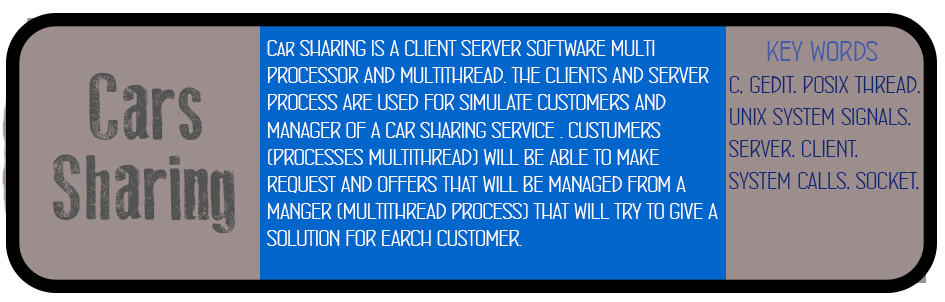
<style>
.page{position:relative;width:945px;height:302px;background:#9d8e8e}
.page>*{position:absolute;margin:0}
.t1{font:22.7px "ConcursoItalianBTNWide";color:#ffffff}
.t2{font:26.7px "ConcursoItalianBTNWide";color:#112672}
.t3{font:32px "ConcursoItalianBTNWide";color:#455baa}
.t4{font:93.3px "OldPress";color:#525252}
.t5{font:80px "ConcursoItalianBTNWide";color:#525252}
</style>
<div class="page">
<p class="t1" style="left:267px;top:40px;width:451px;height:206px">Car SHARING IS A CLIENT SERVER SOFTWARE MULTI<br>PROCESSOR AND MULTITHREAD. THE CLIENTS AND SERVER <br>PROCESS ARE USED FOR SIMULATE CUSTOMERS AND <br>MANAGER OF A CAR SHARING SERVICE . CUSTUMERS <br>(PROCESSES MULTITHREAD) WILL BE ABLE TO MAKE <br>REQUEST AND OFFERS THAT WILL BE MANAGED FROM A <br>MANGER (MULTITHREAD PROCESS) THAT WILL TRY TO GIVE A <br>SOLUTION FOR EARCH CUSTOMER.</p>
<p class="t2" style="left:729px;top:41px;width:191px;height:149px"><span class="t3">     key words<br></span>c, gedit, posix thread,<br>unix system signals,<br>server, client,<br>system calls, socket,</p>
<p class="t4" style="left:89px;top:72px;width:113px;height:69px"><span class="t5"> </span>Cars</p>
<p class="t4" style="left:53px;top:154px;width:182px;height:80px">Sharing</p>
</div>
